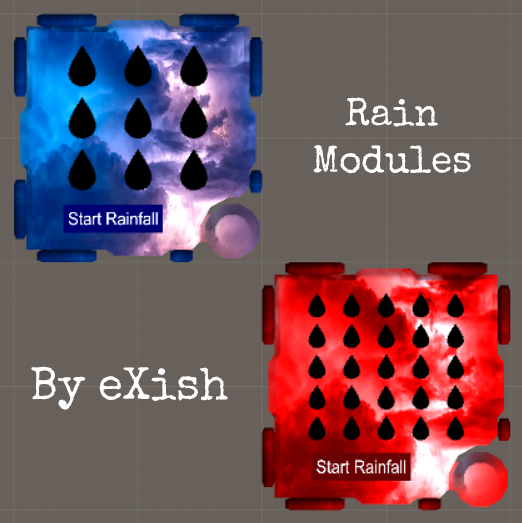
<style>
.page{position:relative;width:522px;height:523px;background:#68615b}
.page>*{position:absolute;margin:0}
.t1{font:38.8px "SpecialElite-Regular";color:#ffffff}
.t2{font:45.9px "SpecialElite-Regular";color:#ffffff}
</style>
<div class="page">
<p class="t1" style="left:313px;top:97px;width:158px;height:77px;text-align:center">Rain<br>Modules</p>
<p class="t2" style="left:31px;top:366px;width:197px;height:44px">By eXish</p>
</div>
